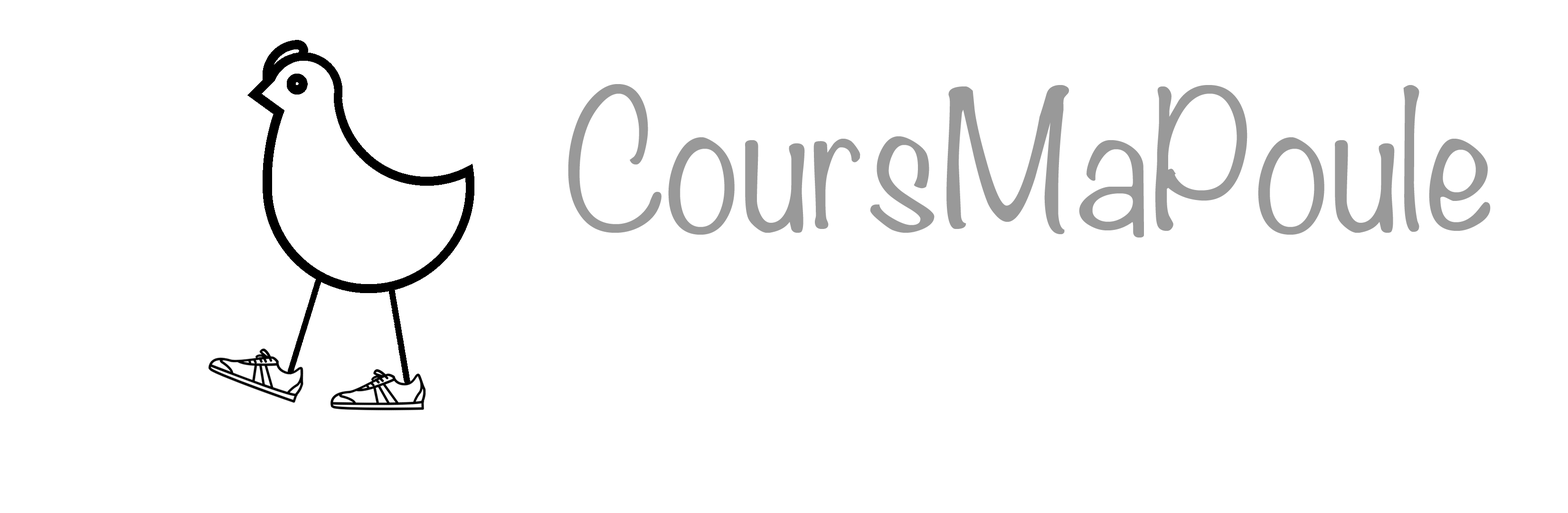
<style>
.page{position:relative;width:1568px;height:513px;background:#ffffff}
.page>*{position:absolute;margin:0}
.t1{font:166.2px "Noteworthy-Light";color:#999999}
</style>
<div class="page">
<p class="t1" style="left:568px;top:84px;width:923px;height:153px">CoursMaPoule</p>
</div>
